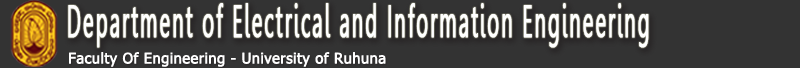
<style>
.page{position:relative;width:800px;height:68px;background:#333333}
.page>*{position:absolute;margin:0}
.t1{font:45.2px "Leelawadee";letter-spacing:0.075em;color:#ffffff;font-weight:bold;scale:0.45 1}
.t2{font:14.5px "Tahoma";letter-spacing:0.01em;color:#ffffff;font-weight:bold}
</style>
<div class="page">
<p class="t1" style="left:68px;top:3px;width:581px;height:45px">Department of Electrical and Information Engineering</p>
<p class="t2" style="left:69px;top:52px;width:317px;height:15px">Faculty Of Engineering - University of Ruhuna</p>
</div>
